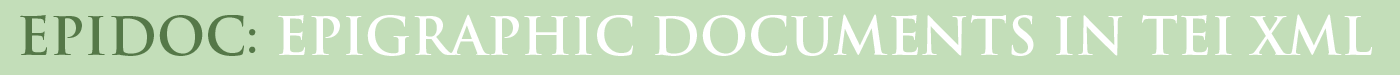
<style>
.page{position:relative;width:1400px;height:75px;background:#c3deb9}
.page>*{position:absolute;margin:0}
.t1{font:52px "Trajan-Bold";color:#ffffff}
.t2{font:52px "Trajan-Bold";color:#557848}
</style>
<div class="page">
<p class="t1" style="left:20px;top:14px;width:1352px;height:42px"><span class="t2">epidoc: </span>epigraphic documents in tei xml</p>
</div>
